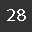
<style>
.page{position:relative;width:32px;height:32px;background:#333333}
.page>*{position:absolute;margin:0}
.t1{font:17.8px "MyriadPro-Regular";color:#ffffff;scale:1.12 1}
</style>
<div class="page">
<p class="t1" style="left:7px;top:9px;width:19px;height:12px">28</p>
</div>
